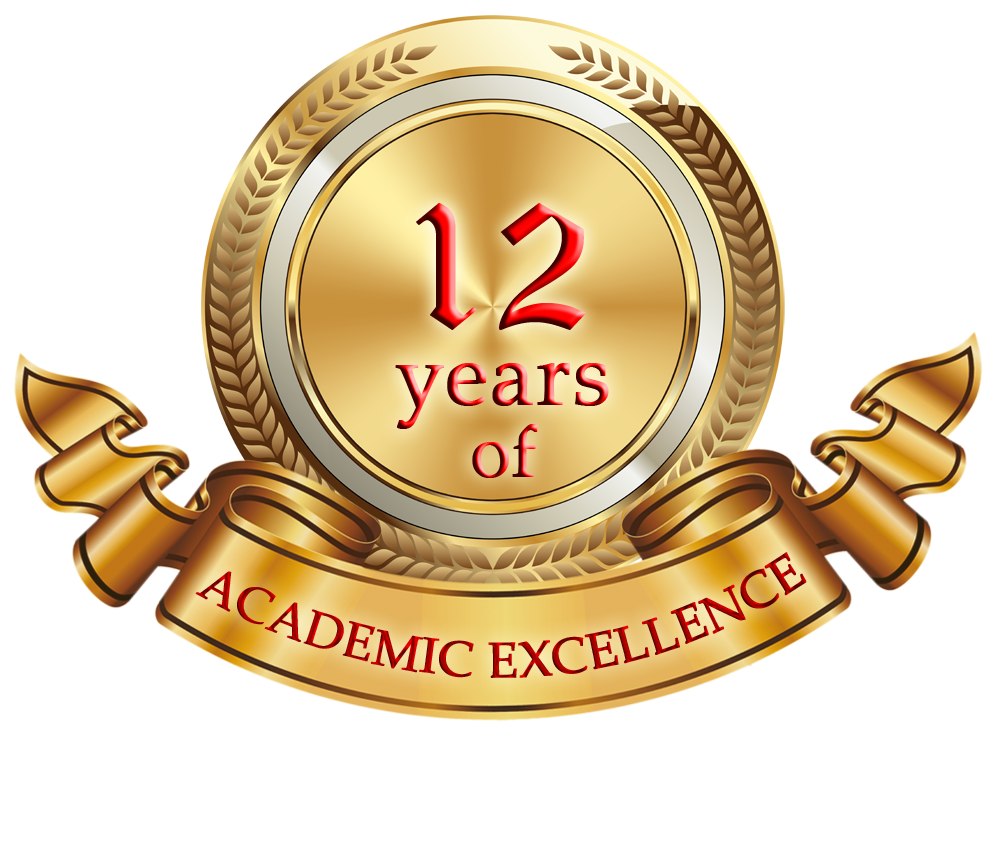
<style>
.page{position:relative;width:1000px;height:842px;background:#ffffff}
.page>*{position:absolute;margin:0}
.t1{font:188.5px "OldEnglishTextMT"}
.t2{font:87.3px/72px "PalatinoLinotype-Roman";font-weight:bold}
.t3{font:72px/72px "PalatinoLinotype-Roman";font-weight:bold}
.t4{font:50px "PalatinoLinotype-Roman";text-transform:uppercase;font-weight:bold}
</style>
<div class="page">
<p class="t1" style="left:416px;top:203px;width:170px;height:127px">12</p>
<p class="t2" style="left:395px;top:363px;width:214px;height:115px;text-align:center">years<br><span class="t3">of</span></p>
<p class="t4" style="left:195px;top:552px;width:612px;height:126px">Academic Excellence</p>
</div>
